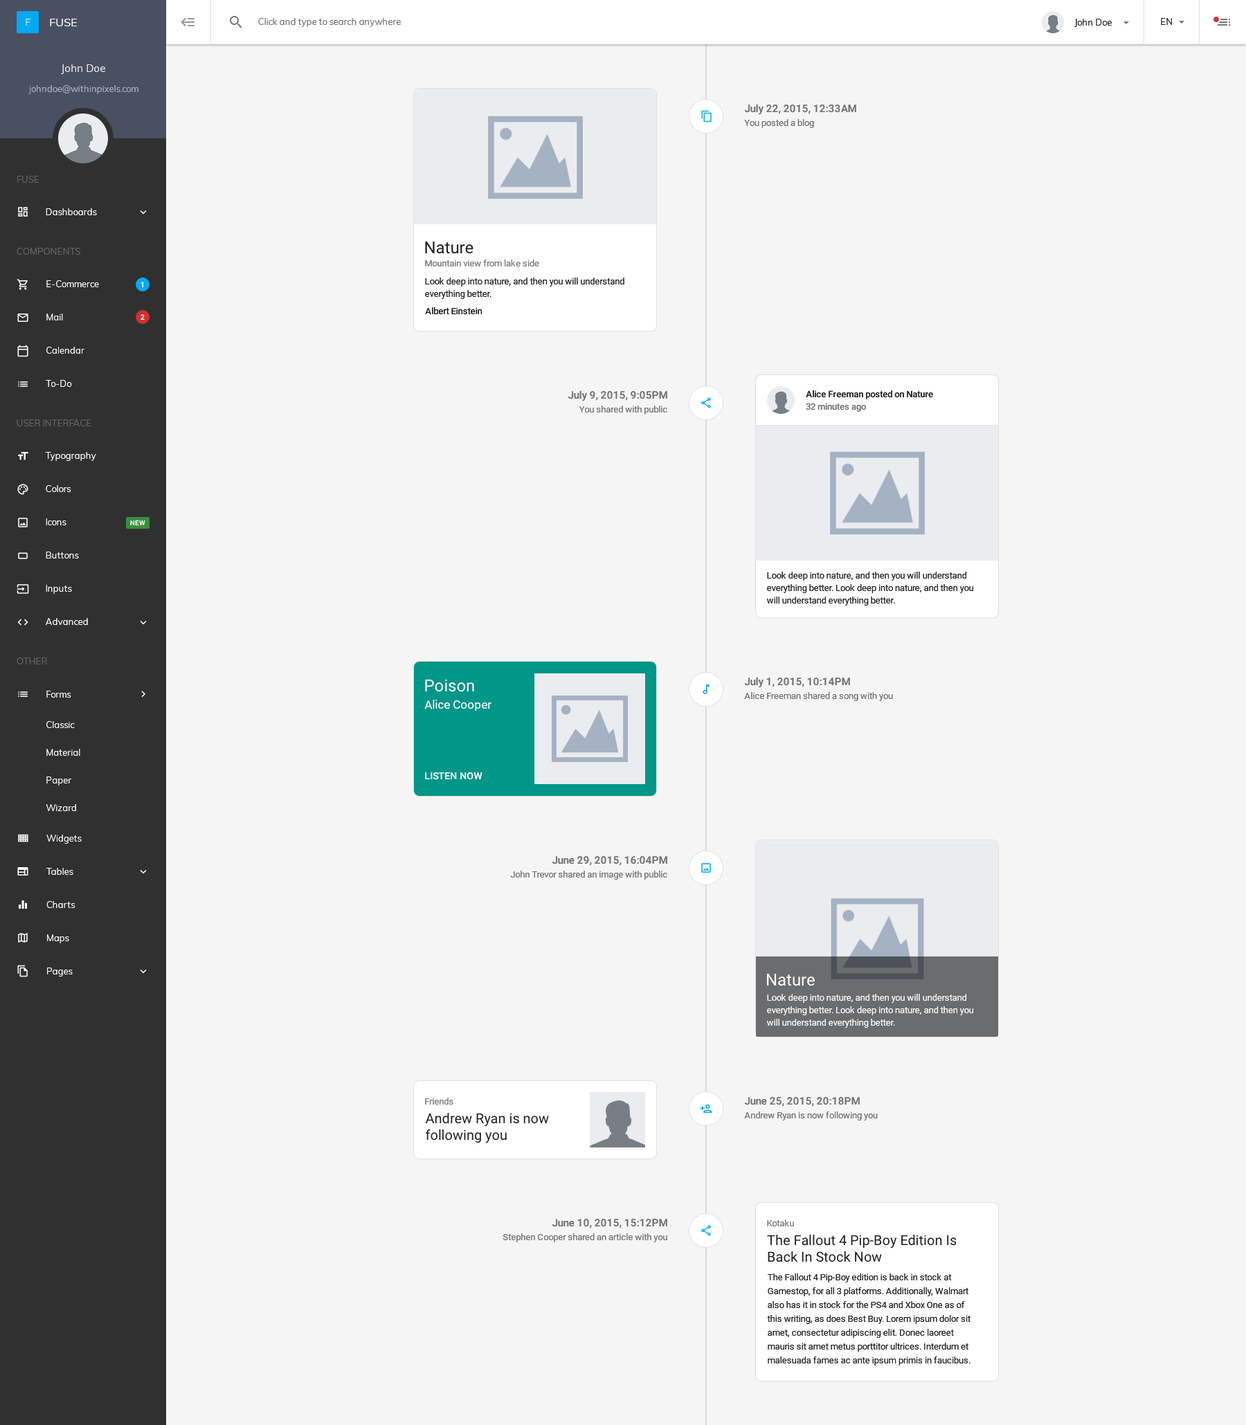
<style>
.page{position:relative;width:1246px;height:1425px;background:#f5f5f5}
.page>*{position:absolute;margin:0}
.t1{font:10.4px "Roboto-Medium";color:#707070}
.t2{font:9px "Roboto-Regular";color:#707070}
.t3{font:16.6px "Roboto-Regular";color:#212121}
.t4{font:9px "Roboto-Regular";color:#757575}
.t5{font:9px/12.5px "Roboto-Regular";color:#212121}
.t6{font:9px "Roboto-Regular";color:#000000}
.t7{font:9px "Roboto-Medium";color:#212121}
.t8{font:9px "Roboto-Medium";color:#757575}
.t9{font:16.6px "Roboto-Regular";color:#ffffff}
.t10{font:11.8px "Roboto-Regular";color:#ffffff}
.t11{font:9.7px "Roboto-Medium";color:#ffffff}
.t12{font:9px/12.5px "Roboto-Regular";color:#ffffff}
.t13{font:13.8px/16.6px "Roboto-Regular";color:#212121}
.t14{font:9px/13.8px "Roboto-Regular";color:#212121}
</style>
<div class="page">
<p class="t1" style="left:745px;top:104px;width:111px;height:11px">July 22, 2015, 12:33AM</p>
<p class="t2" style="left:744px;top:119px;width:70px;height:9px">You posted a blog</p>
<p class="t3" style="left:425px;top:241px;width:49px;height:13px">Nature</p>
<p class="t4" style="left:425px;top:260px;width:114px;height:7px">Mountain view from lake side</p>
<p class="t5" style="left:425px;top:278px;width:199px;height:21px">Look deep into nature, and then you will understand<br>everything better.</p>
<p class="t6" style="left:425px;top:307px;width:57px;height:7px">Albert Einstein</p>
<p class="t1" style="left:568px;top:390px;width:99px;height:12px">July 9, 2015, 9:05PM</p>
<p class="t7" style="left:806px;top:390px;width:127px;height:9px">Alice Freeman posted on Nature</p>
<p class="t2" style="left:579px;top:406px;width:88px;height:9px">You shared with public</p>
<p class="t8" style="left:806px;top:403px;width:60px;height:9px">32 minutes ago</p>
<p class="t5" style="left:766px;top:572px;width:207px;height:34px">Look deep into nature, and then you will understand<br>everything better. Look deep into nature, and then you<br>will understand everything better.</p>
<p class="t1" style="left:745px;top:677px;width:105px;height:11px">July 1, 2015, 10:14PM</p>
<p class="t9" style="left:425px;top:679px;width:49px;height:13px">Poison</p>
<p class="t10" style="left:424px;top:700px;width:68px;height:11px">Alice Cooper</p>
<p class="t2" style="left:744px;top:692px;width:149px;height:9px">Alice Freeman shared a song with you</p>
<p class="t11" style="left:425px;top:773px;width:58px;height:7px">LISTEN NOW</p>
<p class="t1" style="left:552px;top:856px;width:115px;height:10px">June 29, 2015, 16:04PM</p>
<p class="t2" style="left:510px;top:871px;width:157px;height:9px">John Trevor shared an image with public</p>
<p class="t9" style="left:767px;top:973px;width:48px;height:14px">Nature</p>
<p class="t12" style="left:766px;top:994px;width:207px;height:34px">Look deep into nature, and then you will understand<br>everything better. Look deep into nature, and then you<br>will understand everything better.</p>
<p class="t1" style="left:745px;top:1097px;width:115px;height:10px">June 25, 2015, 20:18PM</p>
<p class="t4" style="left:425px;top:1098px;width:28px;height:7px">Friends</p>
<p class="t13" style="left:425px;top:1113px;width:124px;height:31px">Andrew Ryan is now<br>following you</p>
<p class="t2" style="left:744px;top:1112px;width:134px;height:9px">Andrew Ryan is now following you</p>
<p class="t1" style="left:552px;top:1219px;width:115px;height:10px">June 10, 2015, 15:12PM</p>
<p class="t4" style="left:767px;top:1220px;width:27px;height:7px">Kotaku</p>
<p class="t2" style="left:503px;top:1234px;width:164px;height:9px">Stephen Cooper shared an article with you</p>
<p class="t13" style="left:767px;top:1235px;width:190px;height:28px">The Fallout 4 Pip-Boy Edition Is<br>Back In Stock Now</p>
<p class="t14" style="left:767px;top:1274px;width:204px;height:92px">The Fallout 4 Pip-Boy edition is back in stock at<br>Gamestop, for all 3 platforms. Additionally, Walmart<br>also has it in stock for the PS4 and Xbox One as of<br>this writing, as does Best Buy. Lorem ipsum dolor sit<br>amet, consectetur adipiscing elit. Donec laoreet<br>mauris sit amet metus porttitor ultrices. Interdum et<br>malesuada fames ac ante ipsum primis in faucibus.</p>
</div>
